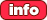
<style>
.page{position:relative;width:47px;height:20px;background:#ff2846}
.page>*{position:absolute;margin:0}
.t1{font:15px "Gotham-Ultra";letter-spacing:-0.01em;color:#fefefe}
</style>
<div class="page">
<p class="t1" style="left:9px;top:4px;width:30px;height:12px">info</p>
</div>
